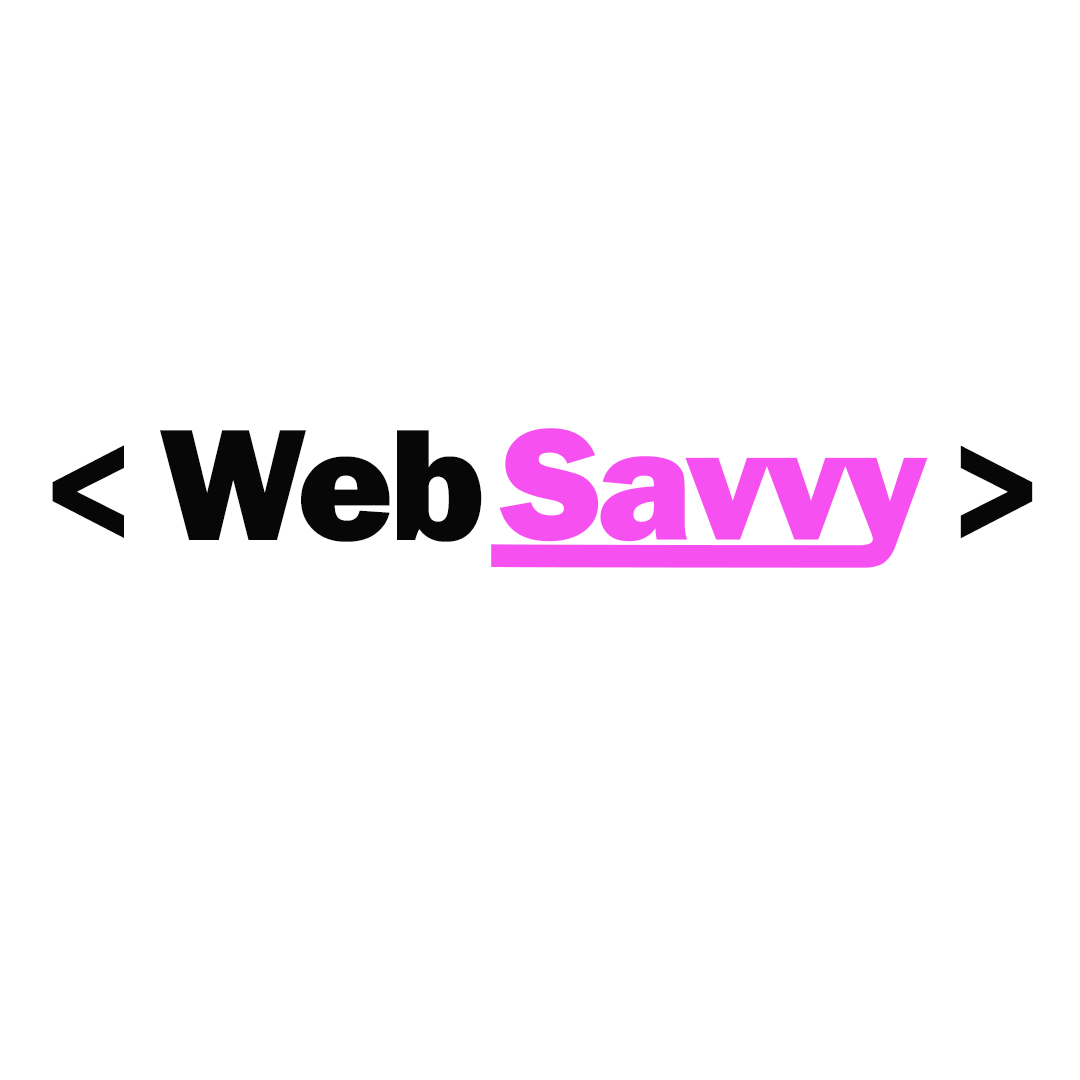
<style>
.page{position:relative;width:1080px;height:1080px;background:#ffffff}
.page>*{position:absolute;margin:0}
.t1{font:164.4px "FranklinGothic-Heavy";letter-spacing:-0.03em;color:#070707}
</style>
<div class="page">
<p class="t1" style="left:160px;top:430px;width:322px;height:112px">Web</p>
<p class="t1" style="left:52px;top:445px;width:72px;height:93px">&lt;</p>
<p class="t1" style="left:960px;top:445px;width:73px;height:94px">&gt;</p>
</div>
